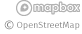
<style>
.page{position:relative;width:82px;height:34px;background:#ffffff}
.page>*{position:absolute;margin:0}
.t1{font:14px "FiraSans-Book";color:#7a7a7a}
.t2{font:9px "FiraSans-Book";color:#787878}
</style>
<div class="page">
<p class="t1" style="left:4px;top:20px;width:10px;height:10px">©</p>
<p class="t2" style="left:17px;top:21px;width:63px;height:9px">OpenStreetMap</p>
</div>
